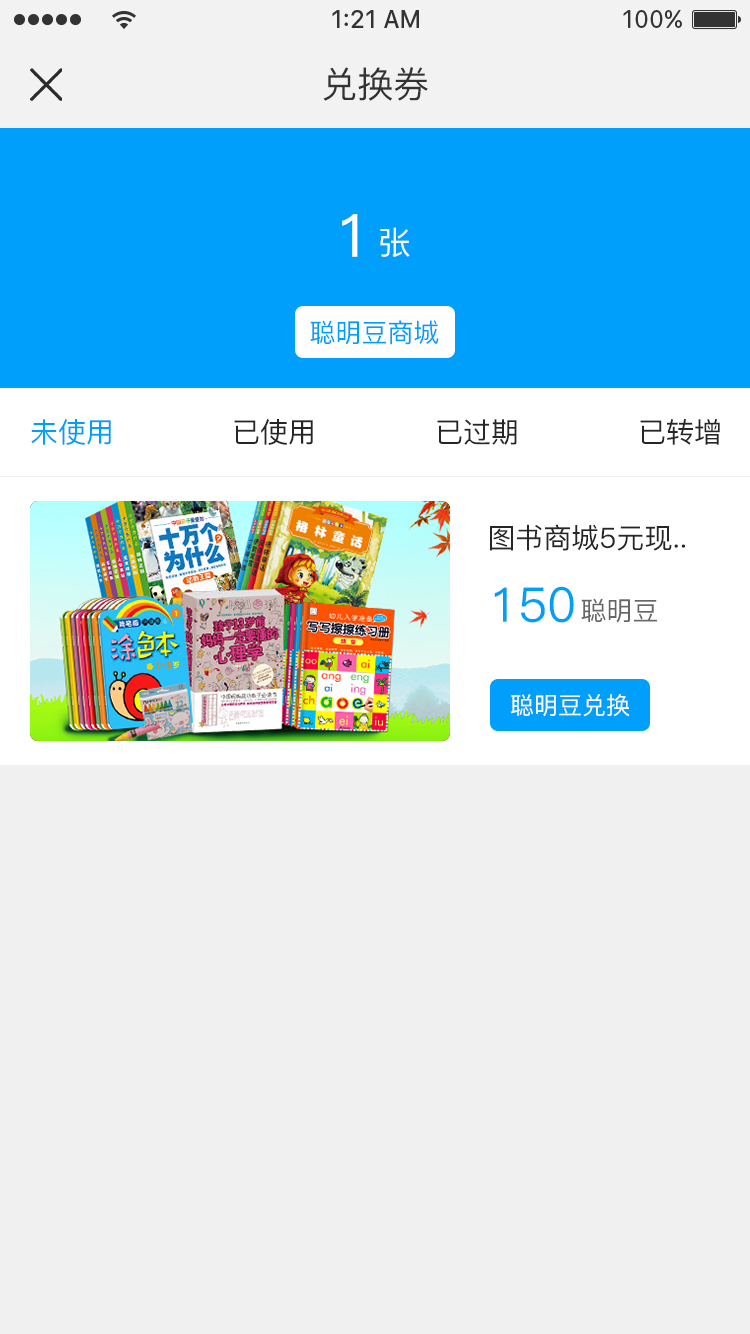
<style>
.page{position:relative;width:750px;height:1334px;background:#f0f0f1}
.page>*{position:absolute;margin:0}
.t1{font:36px "PingFang-SC-Medium";color:#333333}
.t2{font:60px "PingFang-SC-Medium";color:#ffffff}
.t3{font:32px "PingFang-SC-Medium";color:#ffffff}
.t4{font:26px "PingFang-SC-Medium";color:#009ffb}
.t5{font:28px "PingFang-SC-Medium";color:#009ffb}
.t6{font:28px "PingFang-SC-Medium";color:#262626}
.t7{font:48px "PingFang-SC-Medium";color:#009ffb}
.t8{font:26px "PingFang-SC-Medium";color:#666666}
.t9{font:24px "PingFang-SC-Medium";color:#ffffff}
</style>
<div class="page">
<p class="t1" style="left:323px;top:67px;width:105px;height:34px">兑换券</p>
<p class="t2" style="left:342px;top:214px;width:16px;height:43px">1</p>
<p class="t3" style="left:380px;top:227px;width:30px;height:30px">张</p>
<p class="t4" style="left:310px;top:320px;width:129px;height:25px">聪明豆商城</p>
<p class="t5" style="left:31px;top:419px;width:80px;height:26px">未使用</p>
<p class="t6" style="left:234px;top:419px;width:79px;height:26px">已使用</p>
<p class="t6" style="left:437px;top:419px;width:80px;height:26px">已过期</p>
<p class="t6" style="left:640px;top:419px;width:80px;height:26px">已转增</p>
<p class="t6" style="left:490px;top:524px;width:196px;height:27px">图书商城5元现..</p>
<p class="t7" style="left:494px;top:586px;width:80px;height:37px">150</p>
<p class="t8" style="left:581px;top:598px;width:76px;height:25px">聪明豆</p>
<p class="t9" style="left:511px;top:694px;width:119px;height:23px">聪明豆兑换</p>
</div>
